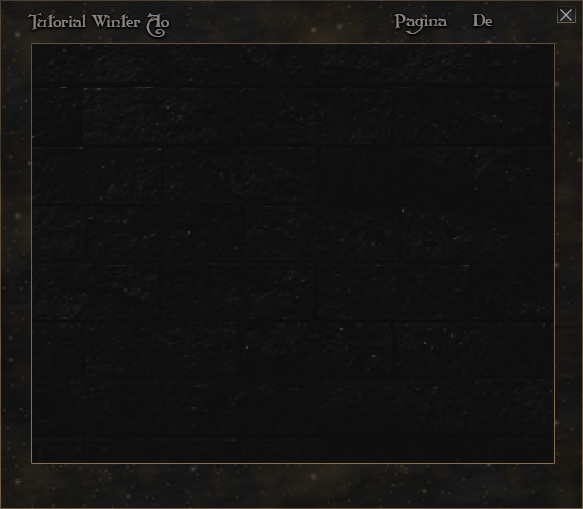
<style>
.page{position:relative;width:583px;height:509px}
.page>*{position:absolute;margin:0}
.t1{font:17.2px "Folkard";color:#88837e}
</style>
<div class="page">
<p class="t1" style="left:28px;top:13px;width:141px;height:24px">Tutorial Winter Ao</p>
<p class="t1" style="left:394px;top:14px;width:53px;height:20px">Pagina</p>
<p class="t1" style="left:473px;top:14px;width:19px;height:12px">De</p>
</div>
